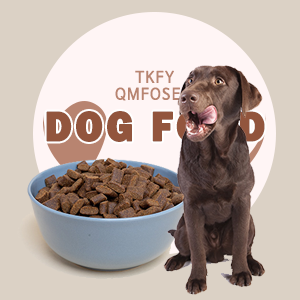
<style>
.page{position:relative;width:300px;height:300px;background:#dbd1c5}
.page>*{position:absolute;margin:0}
.t1{font:15.4px "NanumBarunGothicOTF";letter-spacing:0.075em;color:#b88470;font-weight:bold;scale:0.91 1}
.t2{font:43px "FranklinGothic-Heavy";letter-spacing:0.075em;color:#92553d;font-weight:bold;scale:0.91 1}
</style>
<div class="page">
<p class="t1" style="left:115px;top:70px;width:78px;height:31px;text-align:center">TKFY<br>QMFOSEM</p>
<p class="t2" style="left:46px;top:111px;width:219px;height:31px">DOG FOOD</p>
</div>
